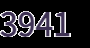
<style>
.page{position:relative;width:90px;height:48px;background:#000000}
.page>*{position:absolute;margin:0}
.t1{font:32px "WebPSD-18463539-0-Regular";color:#3f3254;font-weight:bold}
</style>
<div class="page">
<p class="t1" style="left:0px;top:0px;width:90px;height:48px">3941</p>
</div>
